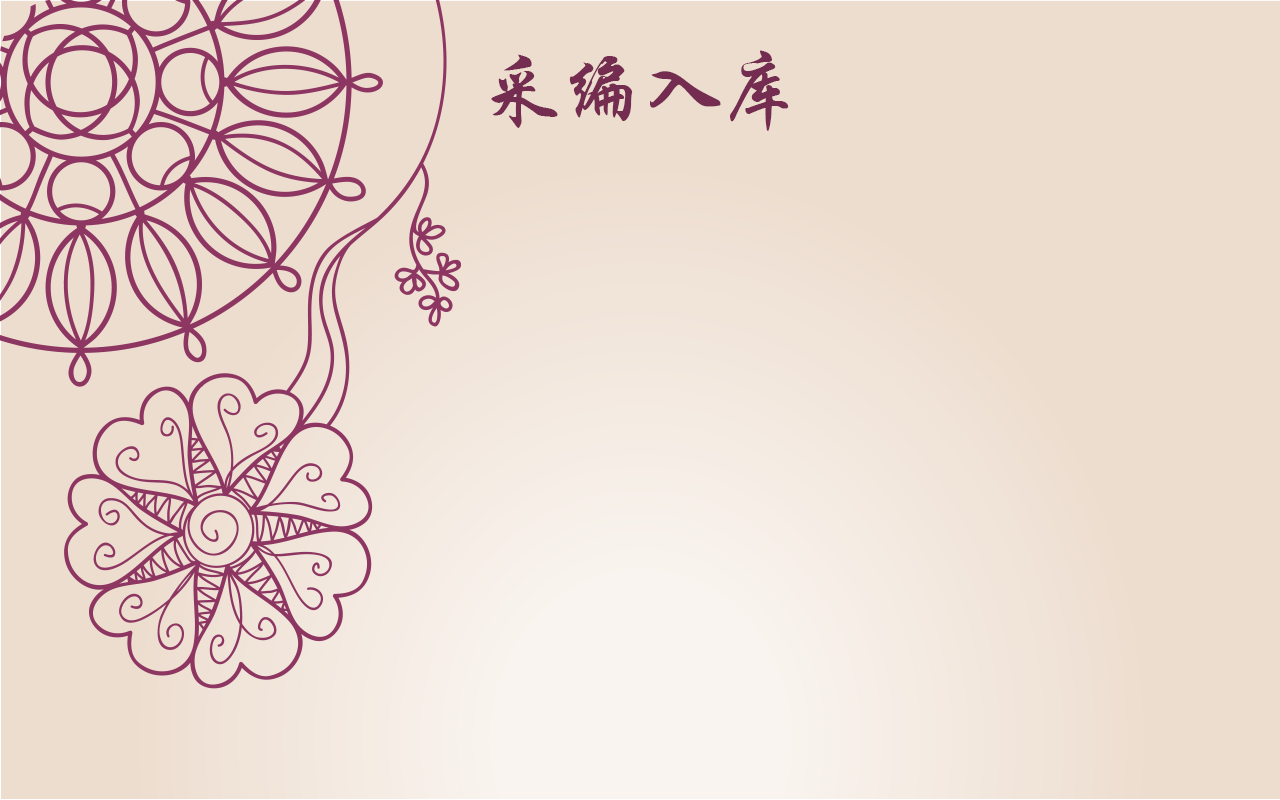
<style>
.page{position:relative;width:1280px;height:800px;background:#edddcf}
.page>*{position:absolute;margin:0}
.t1{font:82.3px "STXingkai";color:#742c50}
</style>
<div class="page">
<p class="t1" style="left:491px;top:50px;width:298px;height:81px">采编入库</p>
</div>
